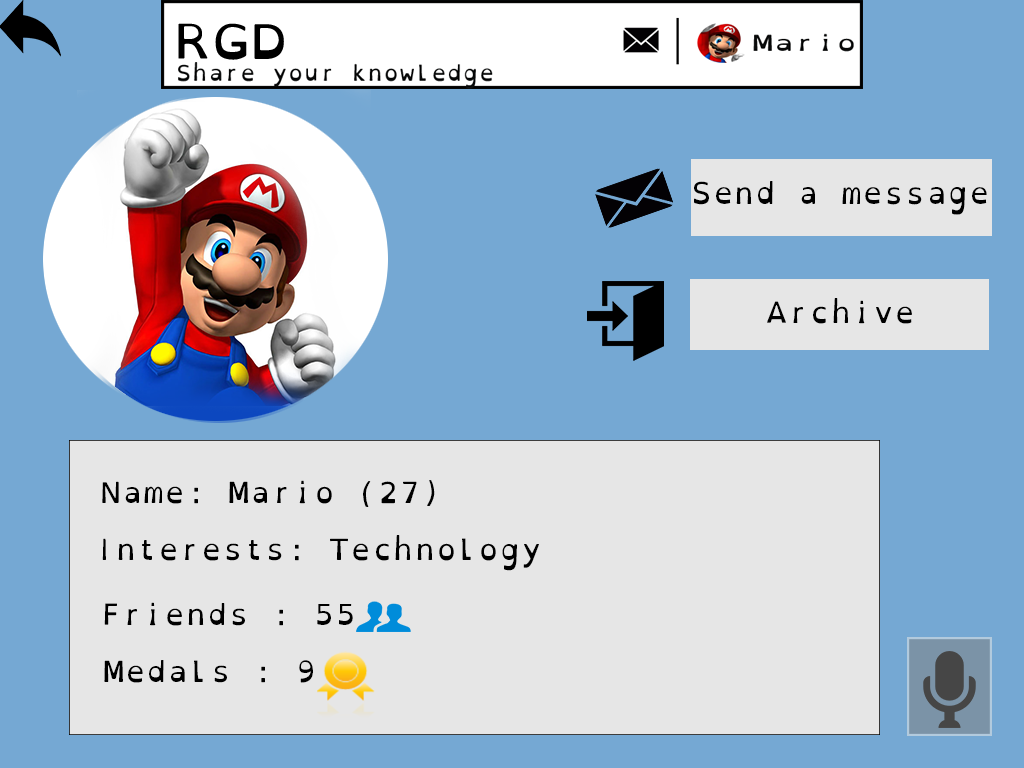
<style>
.page{position:relative;width:1024px;height:768px;background:#75a8d3}
.page>*{position:absolute;margin:0}
.t1{font:30px "OpenDyslexicMono-Regular";color:#000000}
.t2{font:29.2px "OpenDyslexicMono-Regular";color:#000000}
</style>
<div class="page">
<p class="t1" style="left:694px;top:181px;width:293px;height:34px">Send a message</p>
<p class="t2" style="left:767px;top:298px;width:145px;height:26px">Archive</p>
<p class="t2" style="left:102px;top:480px;width:333px;height:27px">Name: Mario (27)</p>
<p class="t2" style="left:102px;top:535px;width:437px;height:36px">Interests: Technology</p>
<p class="t2" style="left:104px;top:602px;width:249px;height:24px">Friends : 55</p>
<p class="t2" style="left:104px;top:660px;width:209px;height:23px">Medals : 9</p>
</div>
